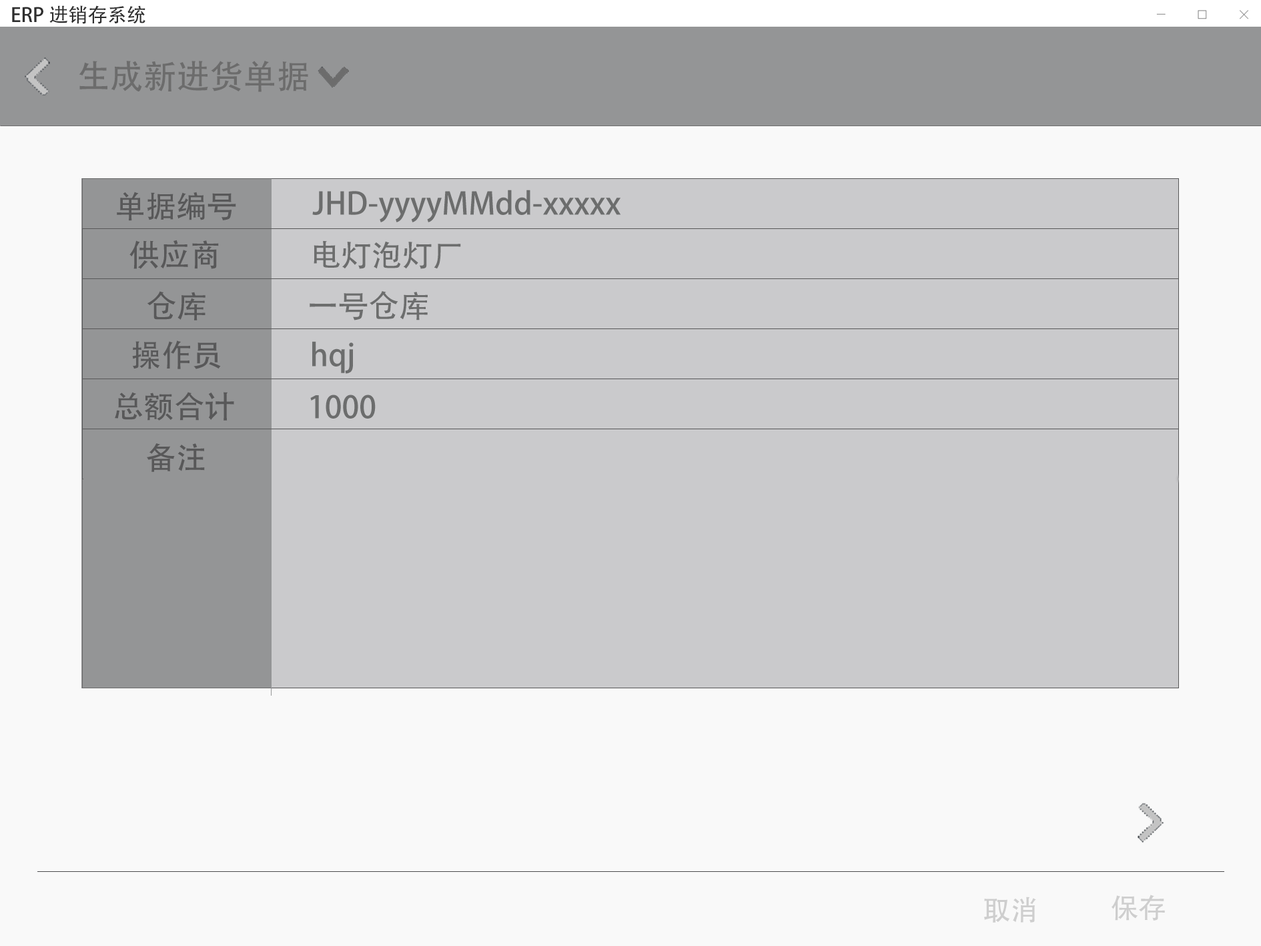
<style>
.page{position:relative;width:1261px;height:946px;background:#f9f9f9}
.page>*{position:absolute;margin:0}
.t1{font:19.5px "AdobeHeitiStd-Regular";color:#2e2e2e}
.t2{font:33.4px "AdobeHeitiStd-Regular";color:#6c6c6c}
.t3{font:30.6px "AdobeHeitiStd-Regular";color:#585859}
.t4{font:30.6px "AdobeHeitiStd-Regular";color:#6c6d6d}
.t5{font:27.8px "AdobeHeitiStd-Regular";color:#cecece}
</style>
<div class="page">
<p class="t1" style="left:12px;top:5px;width:133px;height:19px">ERP进销存系统</p>
<p class="t2" style="left:79px;top:61px;width:229px;height:31px">生成新进货单据</p>
<p class="t3" style="left:117px;top:192px;width:119px;height:29px">单据编号</p>
<p class="t4" style="left:312px;top:190px;width:309px;height:32px">JHD-yyyyMMdd-xxxxx</p>
<p class="t3" style="left:129px;top:240px;width:90px;height:29px">供应商</p>
<p class="t4" style="left:314px;top:240px;width:147px;height:29px">电灯泡灯厂</p>
<p class="t3" style="left:147px;top:291px;width:59px;height:29px">仓库</p>
<p class="t4" style="left:310px;top:291px;width:118px;height:29px">一号仓库</p>
<p class="t3" style="left:132px;top:340px;width:89px;height:29px">操作员</p>
<p class="t4" style="left:312px;top:341px;width:42px;height:33px">hqj</p>
<p class="t3" style="left:115px;top:392px;width:119px;height:28px">总额合计</p>
<p class="t4" style="left:310px;top:394px;width:66px;height:24px">1000</p>
<p class="t3" style="left:147px;top:443px;width:58px;height:29px">备注</p>
<p class="t5" style="left:984px;top:896px;width:52px;height:26px">取消</p>
<p class="t5" style="left:1112px;top:894px;width:53px;height:26px">保存</p>
</div>
